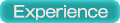
<style>
.page{position:relative;width:120px;height:23px;background:#239e9f}
.page>*{position:absolute;margin:0}
.t1{font:16px "GothicMB101Pro-Medium";letter-spacing:-0.04em;color:#ebece8}
</style>
<div class="page">
<p class="t1" style="left:14px;top:5px;width:94px;height:15px">Experience</p>
</div>
